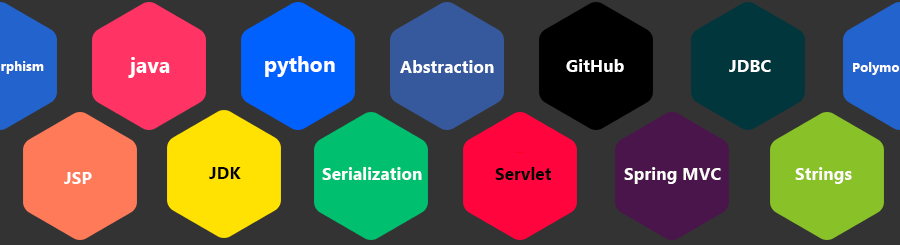
<style>
.page{position:relative;width:900px;height:245px;background:#333333}
.page>*{position:absolute;margin:0}
.t1{font:21.3px "MicrosoftNewTaiLue-Bold";color:#ffffff}
.t2{font:17.3px "MicrosoftNewTaiLue-Bold";color:#ffffff}
.t3{font:17.3px "MicrosoftNewTaiLue-Bold";color:#000000}
.t4{font:17.3px "MicrosoftNewTaiLue-Bold";color:#fffbfb}
</style>
<div class="page">
<p class="t1" style="left:128px;top:57px;width:42px;height:21px">java</p>
<p class="t1" style="left:265px;top:56px;width:70px;height:21px">python</p>
<p class="t2" style="left:400px;top:60px;width:94px;height:13px">Abstraction</p>
<p class="t2" style="left:566px;top:59px;width:58px;height:13px">GitHub</p>
<p class="t2" style="left:729px;top:60px;width:42px;height:12px">JDBC</p>
<p class="t2" style="left:64px;top:172px;width:28px;height:12px">JSP</p>
<p class="t3" style="left:209px;top:167px;width:32px;height:12px">JDK</p>
<p class="t2" style="left:322px;top:167px;width:100px;height:13px">Serialization</p>
<p class="t3" style="left:495px;top:167px;width:56px;height:13px">Servlet</p>
<p class="t4" style="left:624px;top:167px;width:97px;height:17px">Spring MVC</p>
<p class="t4" style="left:795px;top:167px;width:57px;height:17px">Strings</p>
</div>
